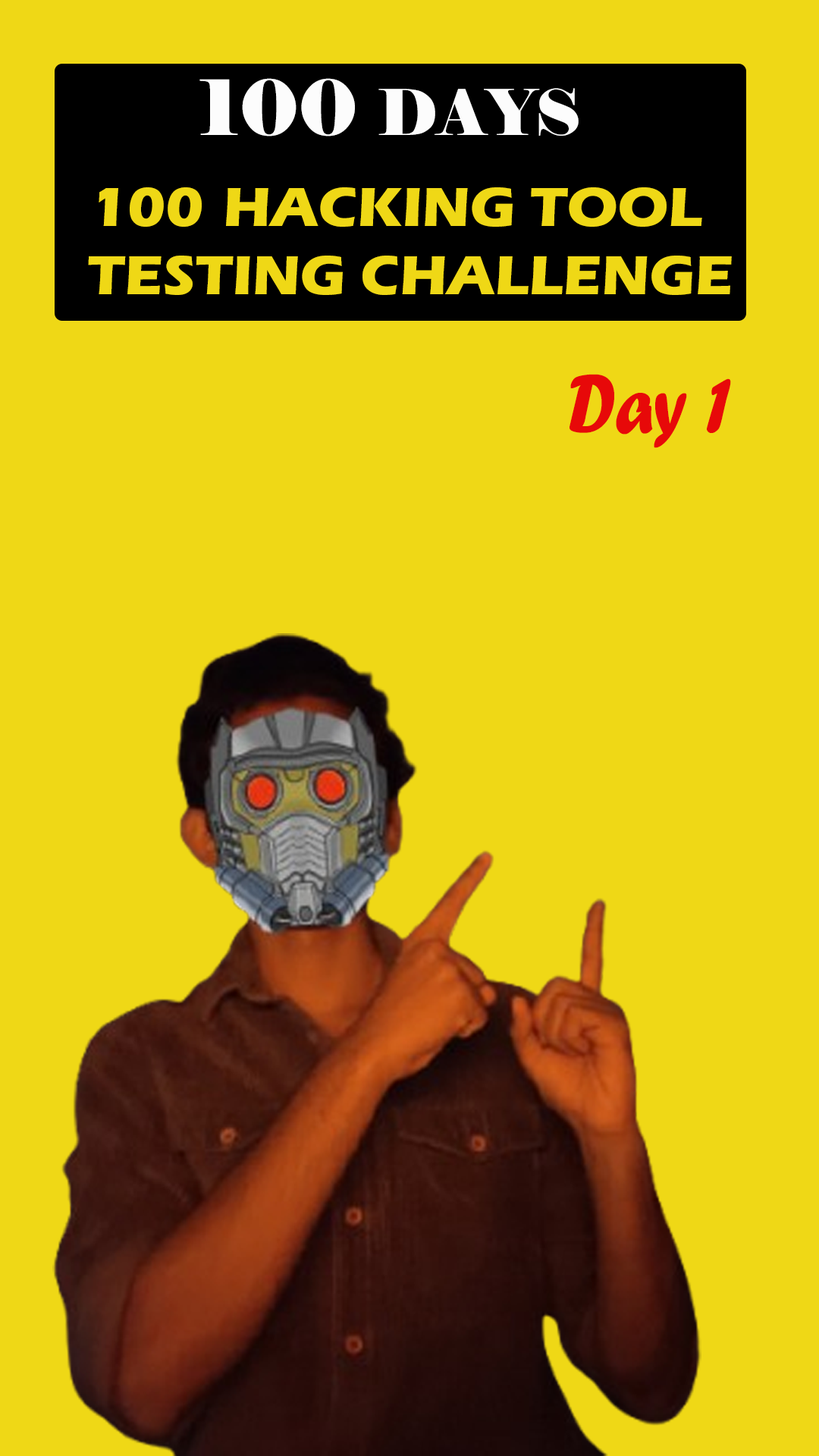
<style>
.page{position:relative;width:819px;height:1456px;background:#efd816}
.page>*{position:absolute;margin:0}
.t1{font:56.9px "ErasITC-Bold";color:#efd816}
.t2{font:44.2px "Candara-Bold";color:#f2f45d}
.t3{font:75.8px "Elephant-Regular";color:#fcfcfc}
.t4{font:63.2px "Elephant-Regular";color:#fcfcfc}
.t5{font:85.3px "ForteMT";color:#e70909;scale:0.81 1}
</style>
<div class="page">
<p class="t1" style="left:88px;top:78px;width:644px;height:217px;text-align:center"><span class="t2">                                                    </span><span class="t3">100 </span><span class="t4">DAYS<br>                           </span>100 HACKING TOOL<br>                                      TESTING CHALLENGE</p>
<p class="t5" style="left:570px;top:374px;width:161px;height:74px">Day 1</p>
</div>
